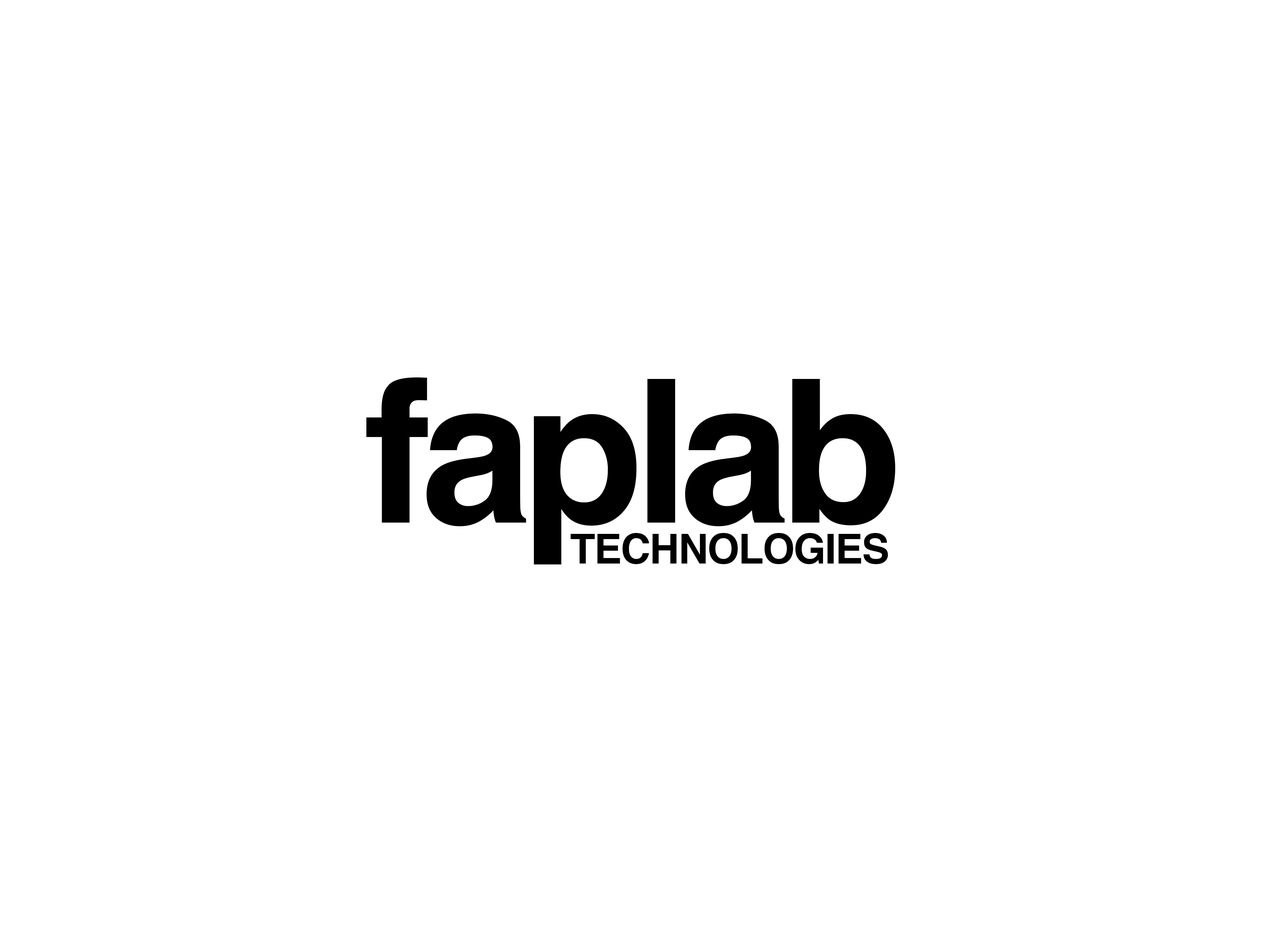
<style>
.page{position:relative;width:1264px;height:944px;background:#ffffff}
.page>*{position:absolute;margin:0}
.t1{font:199.5px "Helvetica-Bold";letter-spacing:-0.05em;color:#000000}
.t2{font:41.3px "Helvetica-Bold";letter-spacing:-0.025em;color:#000000}
</style>
<div class="page">
<p class="t1" style="left:366px;top:377px;width:529px;height:187px">faplab</p>
<p class="t2" style="left:570px;top:533px;width:318px;height:31px">TECHNOLOGIES</p>
</div>
